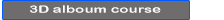
<style>
.page{position:relative;width:224px;height:20px;background:#6e6c6c}
.page>*{position:absolute;margin:0}
.t1{font:10.2px "ArialRoundedMTBold";color:#fcfcfc;scale:1.47 1}
</style>
<div class="page">
<p class="t1" style="left:30px;top:5px;width:131px;height:8px">3D alboum course</p>
</div>
